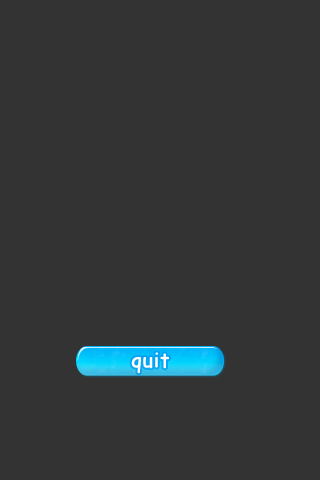
<style>
.page{position:relative;width:320px;height:480px;background:#333333}
.page>*{position:absolute;margin:0}
.t1{font:20.3px "ComicSansMS";color:#ffffff;font-weight:bold}
</style>
<div class="page">
<p class="t1" style="left:131px;top:352px;width:38px;height:21px">quit</p>
</div>
